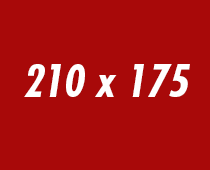
<style>
.page{position:relative;width:210px;height:170px;background:#a80909}
.page>*{position:absolute;margin:0}
.t1{font:42.4px "FuturaStd-CondensedBoldObl";color:#ffffff}
</style>
<div class="page">
<p class="t1" style="left:24px;top:64px;width:166px;height:33px">210 x 175</p>
</div>
